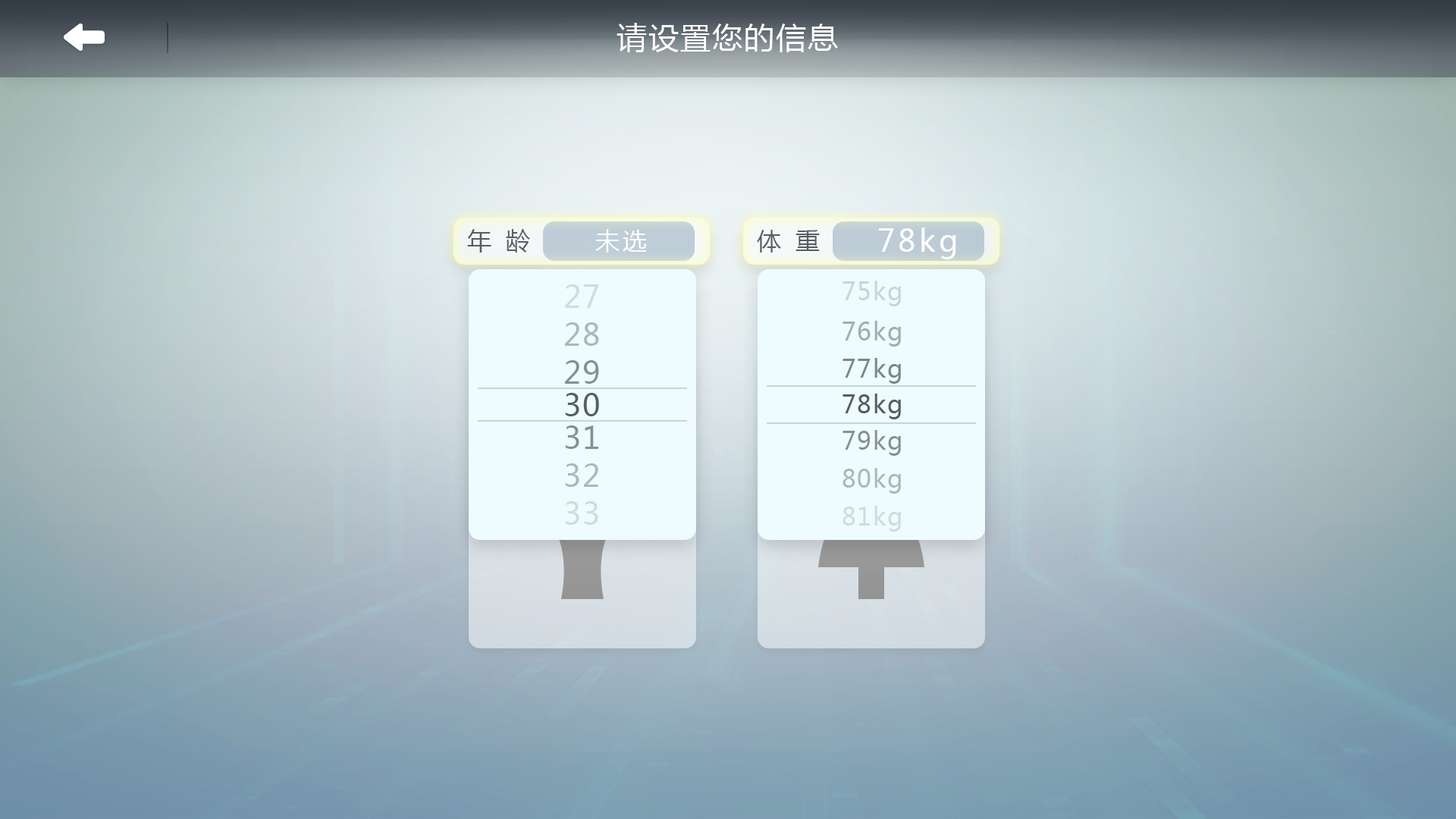
<style>
.page{position:relative;width:1456px;height:819px}
.page>*{position:absolute;margin:0}
.t1{font:24.3px "MicrosoftYaHei";color:#565e63}
.t2{font:24.3px "MicrosoftYaHei";letter-spacing:0.1em;color:#ffffff}
.t3{font:30.3px "MicrosoftYaHei";letter-spacing:0.1em;color:#ffffff}
.t4{font:30.3px "MicrosoftYaHei";letter-spacing:0.05em;color:#cfdbdf}
.t5{font:30.3px "MicrosoftYaHei";letter-spacing:0.05em;color:#acb7bb}
.t6{font:30.3px "MicrosoftYaHei";letter-spacing:0.05em;color:#868f93}
.t7{font:30.3px "MicrosoftYaHei";letter-spacing:0.05em;color:#565e63}
.t8{font:24.3px "MicrosoftYaHei";letter-spacing:0.05em;color:#868f93}
.t9{font:24.3px "MicrosoftYaHei";letter-spacing:0.05em;color:#acb7bb}
.t10{font:24.3px "MicrosoftYaHei";letter-spacing:0.05em;color:#cfdbdf}
</style>
<div class="page">
<p class="t1" style="left:467px;top:229px;width:63px;height:24px">年  龄</p>
<p class="t2" style="left:595px;top:229px;width:52px;height:24px">未选</p>
<p class="t1" style="left:757px;top:230px;width:63px;height:23px">体  重</p>
<p class="t3" style="left:878px;top:227px;width:78px;height:32px">78kg</p>
<p class="t4" style="left:565px;top:284px;width:34px;height:24px">27</p>
<p class="t5" style="left:565px;top:322px;width:34px;height:24px">28</p>
<p class="t6" style="left:565px;top:360px;width:34px;height:24px">29</p>
<p class="t7" style="left:565px;top:393px;width:34px;height:23px">30</p>
<p class="t6" style="left:565px;top:425px;width:33px;height:24px">31</p>
<p class="t8" style="left:842px;top:430px;width:59px;height:26px">79kg</p>
<p class="t5" style="left:565px;top:463px;width:33px;height:24px">32</p>
<p class="t9" style="left:842px;top:468px;width:59px;height:26px">80kg</p>
<p class="t4" style="left:565px;top:501px;width:33px;height:24px">33</p>
<p class="t10" style="left:842px;top:506px;width:59px;height:26px">81kg</p>
</div>
